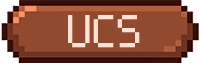
<style>
.page{position:relative;width:200px;height:63px;background:#914930}
.page>*{position:absolute;margin:0}
.t1{font:43px "VPPixel-Simplified";color:#ffe0d2}
</style>
<div class="page">
<p class="t1" style="left:68px;top:15px;width:72px;height:33px">UCS</p>
</div>
